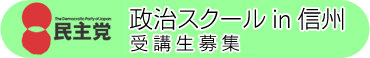
<style>
.page{position:relative;width:370px;height:58px;background:#99ff99}
.page>*{position:absolute;margin:0}
.t1{font:24px "NfMotoyaCedar-W1-90mskp-RKSJ-H";color:#000000}
.t2{font:18px "NfMotoyaCedar-W1-90mskp-RKSJ-H";color:#000000}
</style>
<div class="page">
<p class="t1" style="left:130px;top:7px;width:214px;height:23px">政治スクールin信州</p>
<p class="t2" style="left:131px;top:34px;width:108px;height:18px">受 講 生 募 集</p>
</div>
